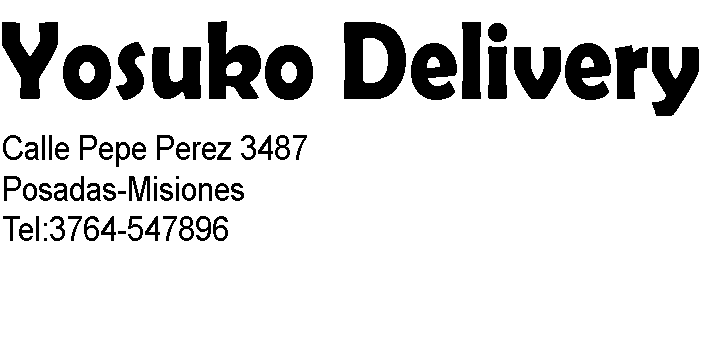
<style>
.page{position:relative;width:702px;height:342px;background:#ffffff}
.page>*{position:absolute;margin:0}
.t1{font:112.3px "BerlinSansFBDemi-Bold";color:#000000;scale:0.87 1}
.t2{font:33.9px "ArialMT";color:#000000;scale:0.88 1}
</style>
<div class="page">
<p class="t1" style="left:2px;top:21px;width:697px;height:95px">Yosuko Delivery</p>
<p class="t2" style="left:3px;top:135px;width:304px;height:106px">Calle Pepe Perez 3487<br>Posadas-Misiones<br>Tel:3764-547896</p>
</div>
